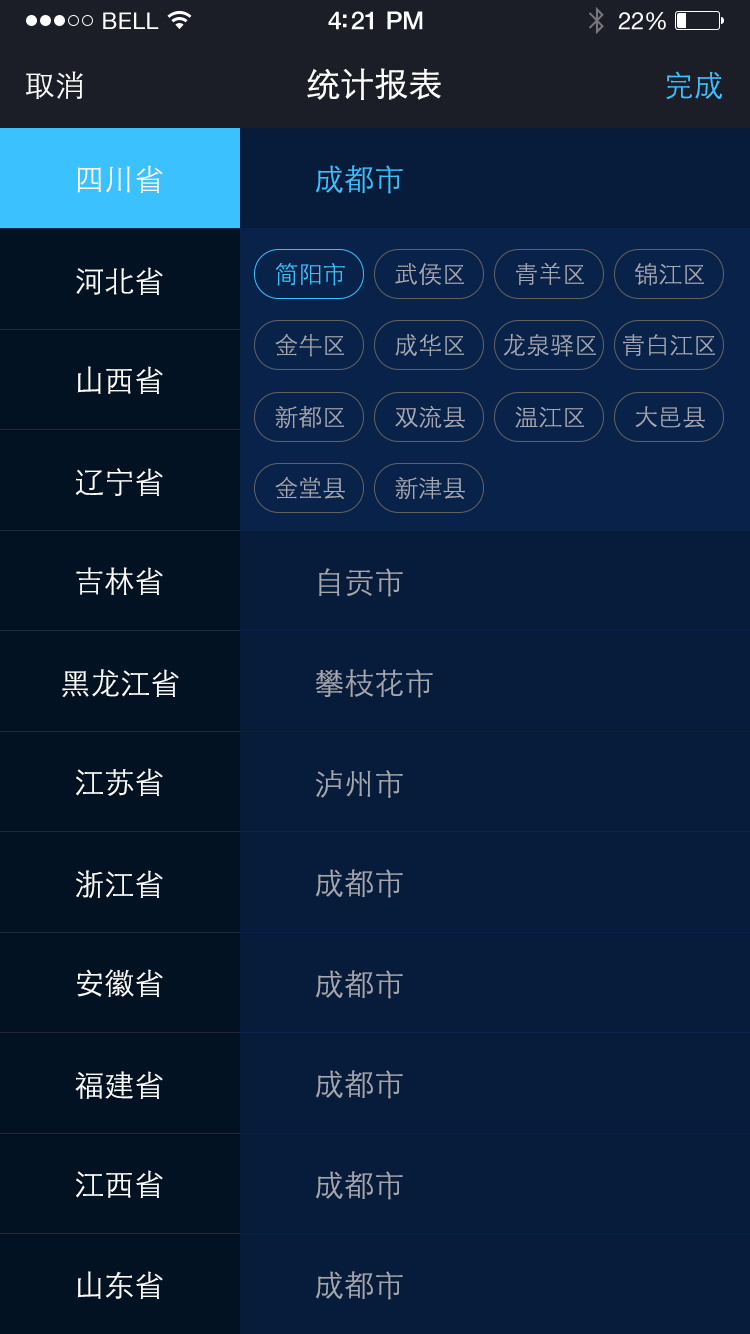
<style>
.page{position:relative;width:750px;height:1334px;background:#071b3a}
.page>*{position:absolute;margin:0}
.t1{font:30px "STXihei";color:#ffffff}
.t2{font:30px "STXihei";color:#3cc1ff}
.t3{font:30px "STXihei";color:#fefefe}
.t4{font:24px "STXihei";color:#3cc1ff}
.t5{font:24px "STXihei";color:#a5a9b3}
.t6{font:30px "STXihei";color:#a4a7ae}
.t7{font:29.7px "STXihei";color:#a4a7ae}
</style>
<div class="page">
<p class="t1" style="left:26px;top:71px;width:57px;height:28px">取消</p>
<p class="t2" style="left:666px;top:71px;width:57px;height:29px">完成</p>
<p class="t3" style="left:77px;top:165px;width:86px;height:28px">四川省</p>
<p class="t2" style="left:315px;top:165px;width:88px;height:29px">成都市</p>
<p class="t3" style="left:76px;top:267px;width:87px;height:28px">河北省</p>
<p class="t4" style="left:275px;top:263px;width:70px;height:23px">简阳市</p>
<p class="t5" style="left:395px;top:263px;width:69px;height:22px">武侯区</p>
<p class="t5" style="left:516px;top:262px;width:68px;height:23px">青羊区</p>
<p class="t5" style="left:634px;top:263px;width:70px;height:23px">锦江区</p>
<p class="t5" style="left:275px;top:333px;width:69px;height:24px">金牛区</p>
<p class="t5" style="left:395px;top:334px;width:69px;height:22px">成华区</p>
<p class="t5" style="left:503px;top:334px;width:93px;height:23px">龙泉驿区</p>
<p class="t5" style="left:623px;top:334px;width:92px;height:22px">青白江区</p>
<p class="t3" style="left:77px;top:366px;width:86px;height:28px">山西省</p>
<p class="t5" style="left:275px;top:406px;width:69px;height:23px">新都区</p>
<p class="t5" style="left:395px;top:405px;width:70px;height:23px">双流县</p>
<p class="t5" style="left:515px;top:406px;width:69px;height:22px">温江区</p>
<p class="t5" style="left:635px;top:406px;width:70px;height:22px">大邑县</p>
<p class="t3" style="left:75px;top:468px;width:88px;height:28px">辽宁省</p>
<p class="t5" style="left:275px;top:476px;width:70px;height:23px">金堂县</p>
<p class="t5" style="left:395px;top:476px;width:70px;height:24px">新津县</p>
<p class="t3" style="left:76px;top:567px;width:87px;height:28px">吉林省</p>
<p class="t6" style="left:319px;top:568px;width:84px;height:29px">自贡市</p>
<p class="t3" style="left:62px;top:669px;width:117px;height:28px">黑龙江省</p>
<p class="t6" style="left:315px;top:669px;width:118px;height:29px">攀枝花市</p>
<p class="t3" style="left:76px;top:768px;width:87px;height:28px">江苏省</p>
<p class="t7" style="left:316px;top:770px;width:87px;height:28px">泸州市</p>
<p class="t3" style="left:76px;top:870px;width:87px;height:28px">浙江省</p>
<p class="t6" style="left:315px;top:869px;width:88px;height:29px">成都市</p>
<p class="t3" style="left:77px;top:969px;width:86px;height:28px">安徽省</p>
<p class="t6" style="left:315px;top:970px;width:88px;height:29px">成都市</p>
<p class="t3" style="left:75px;top:1071px;width:88px;height:28px">福建省</p>
<p class="t6" style="left:315px;top:1070px;width:88px;height:29px">成都市</p>
<p class="t3" style="left:76px;top:1170px;width:87px;height:28px">江西省</p>
<p class="t6" style="left:315px;top:1171px;width:88px;height:29px">成都市</p>
<p class="t3" style="left:77px;top:1271px;width:86px;height:28px">山东省</p>
<p class="t6" style="left:315px;top:1271px;width:88px;height:29px">成都市</p>
</div>
